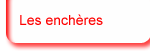
<style>
.page{position:relative;width:150px;height:54px;background:#fefefe}
.page>*{position:absolute;margin:0}
.t1{font:14px "ArialMT";color:#fe0202}
</style>
<div class="page">
<p class="t1" style="left:20px;top:14px;width:83px;height:11px">Les enchères</p>
</div>
